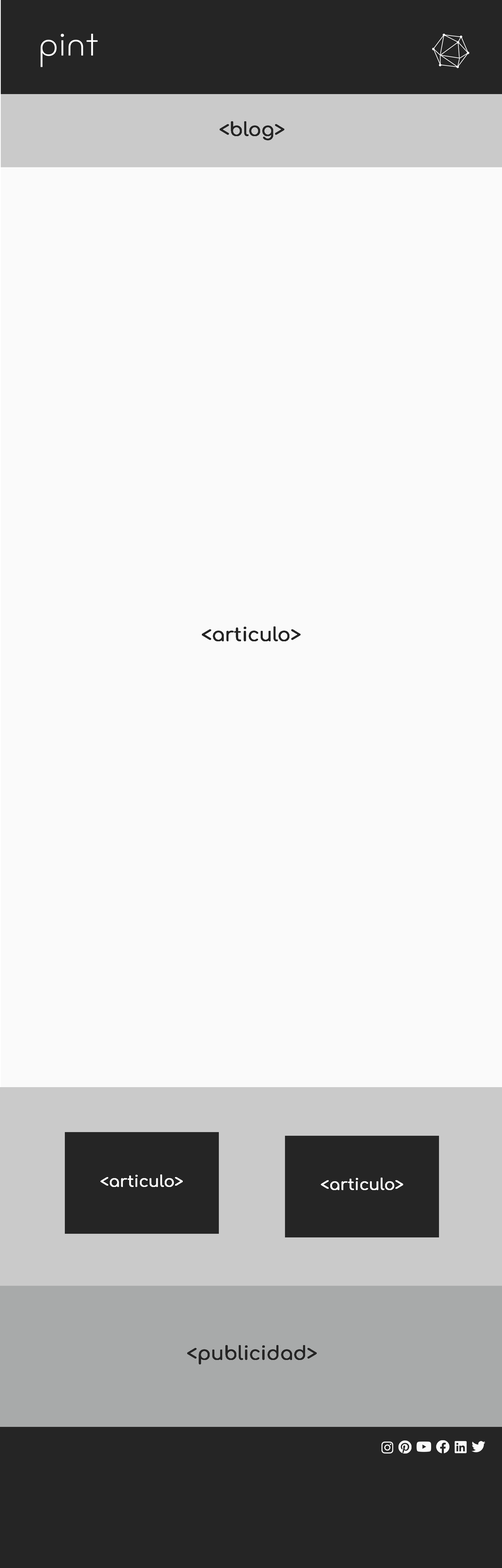
<style>
.page{position:relative;width:502px;height:1568px;background:#fafafa}
.page>*{position:absolute;margin:0}
.t1{font:18.8px "Comfortaa-Medium";letter-spacing:-0.01em;color:#252525;font-weight:bold}
.t2{font:15.7px "Comfortaa-Medium";letter-spacing:-0.01em;color:#fafafa;font-weight:bold}
</style>
<div class="page">
<p class="t1" style="left:220px;top:121px;width:64px;height:19px">&lt;blog&gt;</p>
<p class="t1" style="left:202px;top:626px;width:99px;height:15px">&lt;articulo&gt;</p>
<p class="t2" style="left:100px;top:1174px;width:83px;height:13px">&lt;articulo&gt;</p>
<p class="t2" style="left:321px;top:1178px;width:82px;height:12px">&lt;articulo&gt;</p>
<p class="t1" style="left:187px;top:1345px;width:130px;height:19px">&lt;publicidad&gt;</p>
</div>
